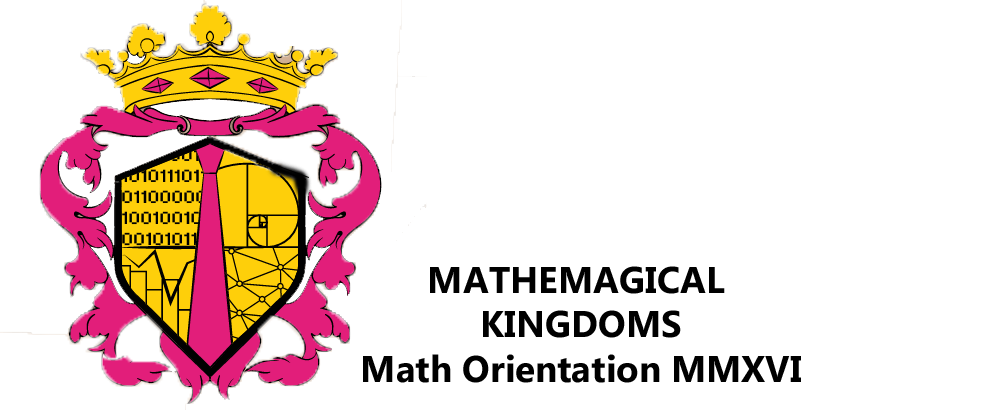
<style>
.page{position:relative;width:1000px;height:410px;background:#ffffff}
.page>*{position:absolute;margin:0}
.t1{font:36.9px "MicrosoftTaiLe-Bold";color:#000000}
</style>
<div class="page">
<p class="t1" style="left:363px;top:266px;width:438px;height:117px;text-align:center">MATHEMAGICAL <br>KINGDOMS<br>Math Orientation MMXVI</p>
</div>
